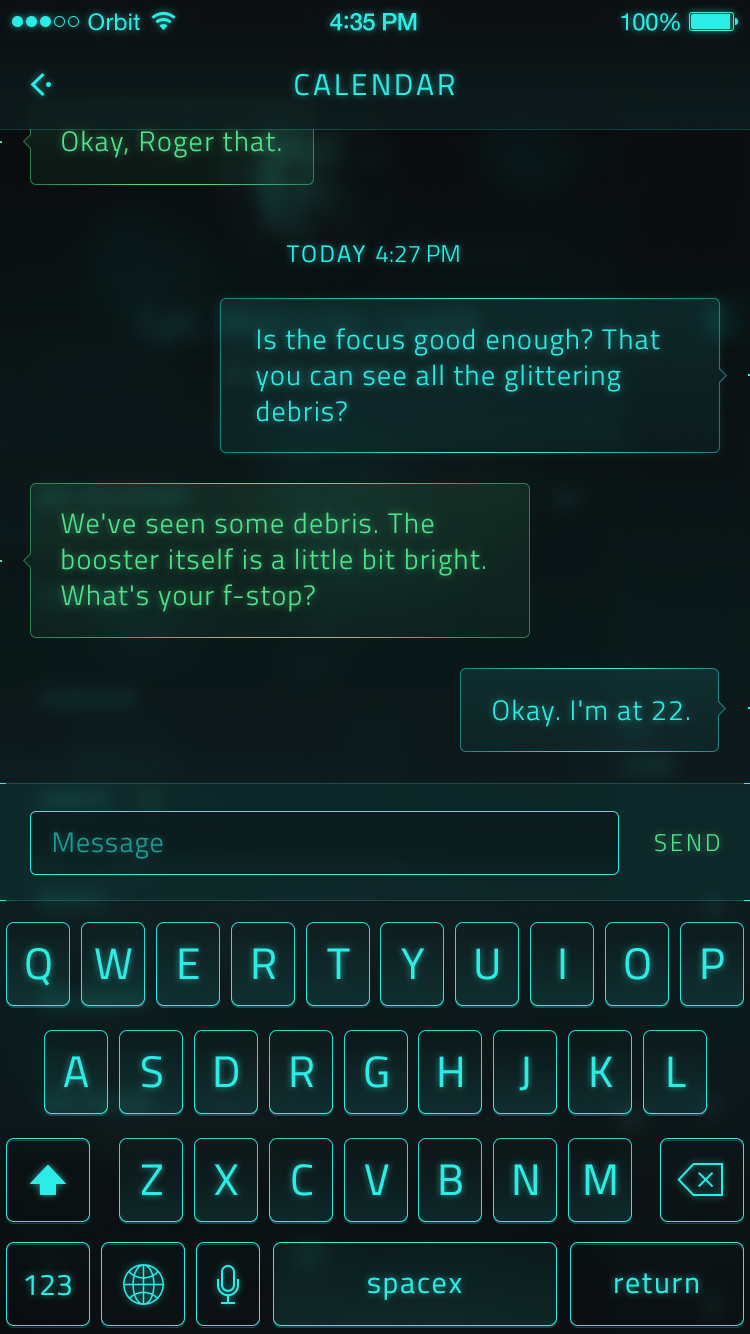
<style>
.page{position:relative;width:750px;height:1334px}
.page>*{position:absolute;margin:0}
.t1{font:23px "HelveticaNeue";letter-spacing:0.02em;color:#2bede6}
.t2{font:24px "HelveticaNeue-Medium";letter-spacing:-0.02em;color:#2bede6}
.t3{font:26px "Avenir-Medium";letter-spacing:-0.02em;color:#2bede6}
.t4{font:24px "HelveticaNeue";letter-spacing:-0.02em;color:#2bede6}
.t5{font:30px "Titillium-Regular";letter-spacing:0.1em;color:#2bede6;text-transform:uppercase}
.t6{font:28px "Titillium-Light";letter-spacing:0.05em;color:#4fe38b}
.t7{font:24px "Titillium-Light";color:#2bede6;text-transform:uppercase}
.t8{font:24px "Titillium-Regular";letter-spacing:0.1em;color:#2bede6;text-transform:uppercase}
.t9{font:28px/36px "Titillium-Light";letter-spacing:0.05em;color:#2bede6}
.t10{font:28px/36px "Titillium-Light";letter-spacing:0.05em;color:#4fe38b}
.t11{font:28px "Titillium-Light";letter-spacing:0.05em;color:#2bede6}
.t12{font:28px "Titillium-Light";letter-spacing:0.04em;color:#1d9d98}
.t13{font:24px "Titillium-Light";letter-spacing:0.12em;color:#4fe38b;text-transform:uppercase}
.t14{font:44px "Titillium-Regular";letter-spacing:0.1em;color:#2bede6}
.t15{font:30px "Titillium-Regular";color:#2bede6}
.t16{font:30px "Titillium-Regular";letter-spacing:0.02em;color:#2bede6}
.t17{font:30px "Titillium-Regular";letter-spacing:0.06em;color:#2bede6}
</style>
<div class="page">
<p class="t1" style="left:88px;top:13px;width:52px;height:18px">Orbit</p>
<p class="t2" style="left:330px;top:13px;width:87px;height:18px">4<span class="t3">:</span>35 PM</p>
<p class="t4" style="left:621px;top:13px;width:59px;height:18px">100%</p>
<p class="t5" style="left:295px;top:74px;width:159px;height:22px">Calendar</p>
<p class="t6" style="left:62px;top:130px;width:219px;height:28px">Okay, Roger that.</p>
<p class="t7" style="left:287px;top:245px;width:172px;height:18px"><span class="t8">TODAY </span>4:27 PM</p>
<p class="t9" style="left:256px;top:328px;width:404px;height:94px">Is the focus good enough? That you can see all the glittering debris?</p>
<p class="t10" style="left:61px;top:512px;width:424px;height:100px">We've seen some debris. The booster itself is a little bit bright. What's your f-stop?</p>
<p class="t11" style="left:493px;top:699px;width:196px;height:28px">Okay. I'm at 22.</p>
<p class="t12" style="left:54px;top:832px;width:109px;height:27px">Message</p>
<p class="t13" style="left:655px;top:834px;width:64px;height:18px">send</p>
<p class="t14" style="left:26px;top:948px;width:25px;height:38px">Q</p>
<p class="t14" style="left:95px;top:948px;width:37px;height:31px">W</p>
<p class="t14" style="left:179px;top:948px;width:20px;height:31px">E</p>
<p class="t14" style="left:253px;top:948px;width:22px;height:31px">R</p>
<p class="t14" style="left:327px;top:948px;width:23px;height:31px">T</p>
<p class="t14" style="left:401px;top:948px;width:24px;height:31px">Y</p>
<p class="t14" style="left:476px;top:948px;width:22px;height:32px">U</p>
<p class="t14" style="left:560px;top:948px;width:5px;height:31px">I</p>
<p class="t14" style="left:625px;top:948px;width:25px;height:32px">O</p>
<p class="t14" style="left:702px;top:948px;width:22px;height:31px">P</p>
<p class="t14" style="left:64px;top:1056px;width:24px;height:31px">A</p>
<p class="t14" style="left:142px;top:1056px;width:20px;height:32px">S</p>
<p class="t14" style="left:215px;top:1056px;width:23px;height:31px">D</p>
<p class="t14" style="left:291px;top:1056px;width:22px;height:31px">R</p>
<p class="t14" style="left:365px;top:1056px;width:23px;height:32px">G</p>
<p class="t14" style="left:439px;top:1056px;width:23px;height:31px">H</p>
<p class="t14" style="left:519px;top:1056px;width:10px;height:35px">J</p>
<p class="t14" style="left:591px;top:1056px;width:22px;height:31px">K</p>
<p class="t14" style="left:668px;top:1056px;width:18px;height:31px">L</p>
<p class="t14" style="left:142px;top:1164px;width:20px;height:31px">Z</p>
<p class="t14" style="left:214px;top:1164px;width:24px;height:31px">X</p>
<p class="t14" style="left:292px;top:1164px;width:20px;height:32px">C</p>
<p class="t14" style="left:365px;top:1164px;width:24px;height:31px">V</p>
<p class="t14" style="left:440px;top:1164px;width:22px;height:31px">B</p>
<p class="t14" style="left:514px;top:1164px;width:23px;height:31px">N</p>
<p class="t14" style="left:585px;top:1164px;width:31px;height:31px">M</p>
<p class="t15" style="left:25px;top:1275px;width:46px;height:21px">1<span class="t16">2</span>3</p>
<p class="t17" style="left:368px;top:1277px;width:94px;height:23px">spacex</p>
<p class="t17" style="left:615px;top:1273px;width:83px;height:21px">return</p>
</div>
